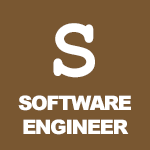
<style>
.page{position:relative;width:150px;height:150px;background:#795731}
.page>*{position:absolute;margin:0}
.t1{font:87px "CourierNewPS-BoldMT";letter-spacing:-0.075em;color:#ffffff}
.t2{font:20px "Arial-Black";letter-spacing:-0.075em;color:#ffffff}
</style>
<div class="page">
<p class="t1" style="left:53px;top:23px;width:42px;height:55px">S</p>
<p class="t2" style="left:18px;top:95px;width:113px;height:40px;text-align:center">SOFTWARE<br>ENGINEER</p>
</div>
